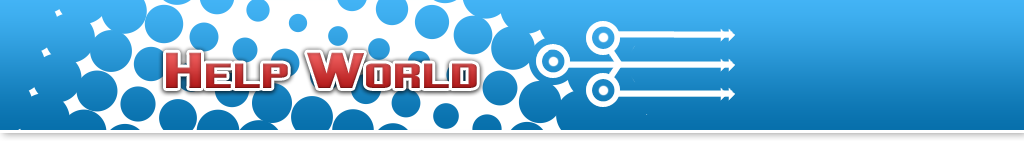
<style>
.page{position:relative;width:1024px;height:141px}
.page>*{position:absolute;margin:0}
.t1{font:60px "CorporateHQ";font-variant:small-caps}
</style>
<div class="page">
<p class="t1" style="left:166px;top:52px;width:311px;height:36px">Help World</p>
</div>
